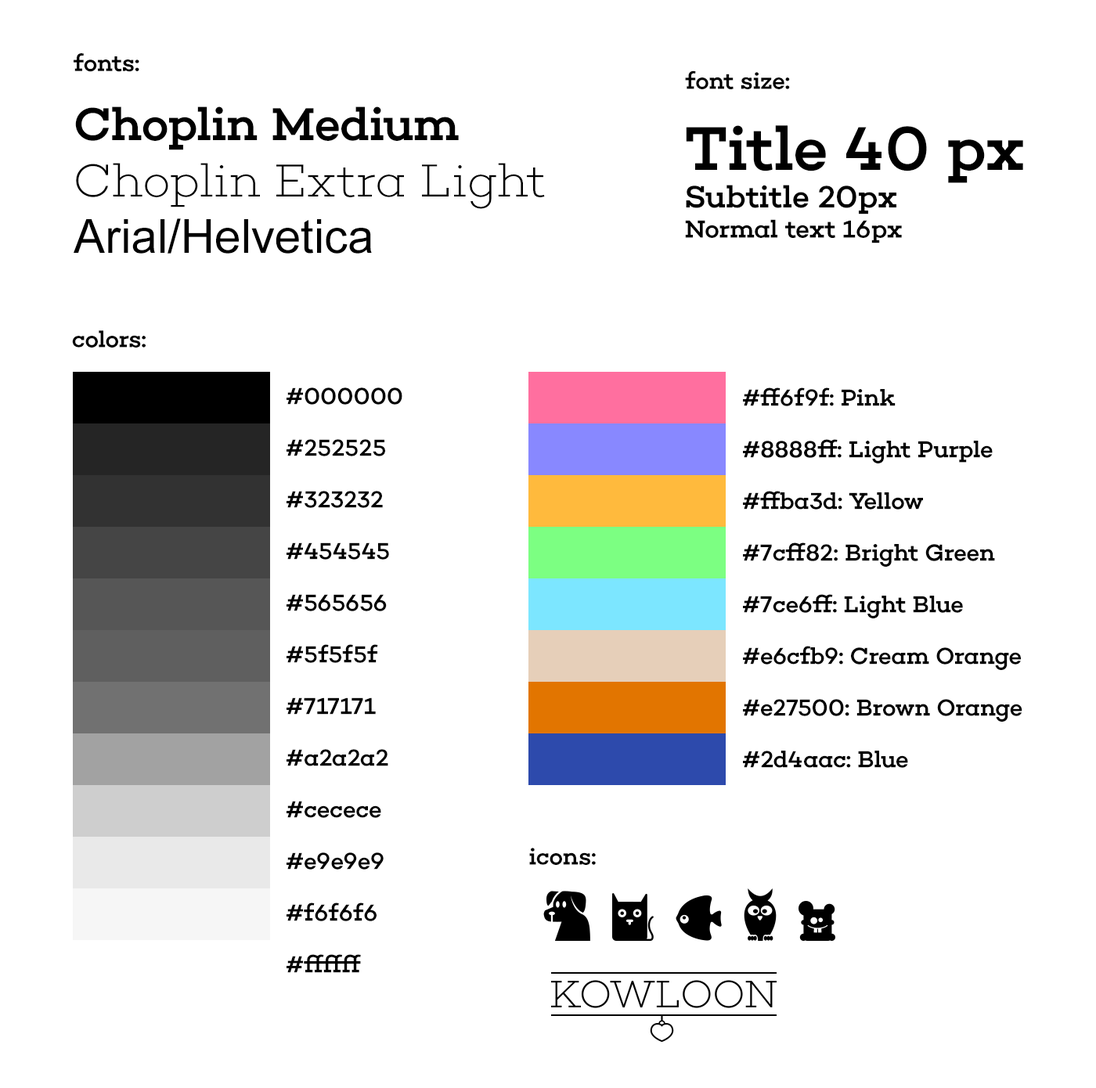
<style>
.page{position:relative;width:1096px;height:1088px;background:#ffffff}
.page>*{position:absolute;margin:0}
.t1{font:23.5px "Choplin-Medium-DEMO";color:#000000}
.t2{font:47px "Choplin-ExtraLight-DEMO";color:#000000}
.t3{font:47px "Choplin-Medium-DEMO";color:#000000}
.t4{font:47px "ArialMT";color:#000000}
.t5{font:25px "Choplin-Medium-DEMO";color:#000000}
.t6{font:62.6px "Choplin-Medium-DEMO";color:#000000}
.t7{font:31.3px "Choplin-Medium-DEMO";color:#000000}
.t8{font:23.5px/51.7px "Choplin-Medium-DEMO";color:#000000}
</style>
<div class="page">
<p class="t1" style="left:74px;top:53px;width:65px;height:19px">fonts:</p>
<p class="t1" style="left:685px;top:70px;width:105px;height:19px">font size:</p>
<p class="t2" style="left:74px;top:106px;width:471px;height:148px"><span class="t3">Choplin Medium<br></span>Choplin Extra Light<br><span class="t4">Arial/Helvetica</span></p>
<p class="t5" style="left:685px;top:125px;width:338px;height:118px"><span class="t6">Title 40 px<br></span><span class="t7">Subtitle 20px<br></span>Normal text 16px</p>
<p class="t1" style="left:72px;top:330px;width:74px;height:18px">colors:</p>
<p class="t8" style="left:287px;top:387px;width:115px;height:586px">#000000<br>#252525<br>#323232<br>#454545<br>#565656<br>#5f5f5f<br>#717171<br>#a2a2a2<br>#cecece<br>#e9e9e9<br>#f6f6f6<br>#ffffff</p>
<p class="t8" style="left:743px;top:387px;width:279px;height:381px">#ff6f9f: Pink<br>#8888ff: Light Purple<br>#ffba3d: Yellow<br>#7cff82: Bright Green<br>#7ce6ff: Light Blue<br>#e6cfb9: Cream Orange<br>#e27500: Brown Orange<br>#2d4aac: Blue</p>
<p class="t1" style="left:529px;top:848px;width:67px;height:17px">icons:</p>
</div>
